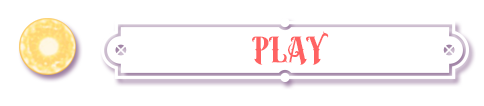
<style>
.page{position:relative;width:484px;height:106px;background:#ffffff}
.page>*{position:absolute;margin:0}
.t1{font:41.7px "Moyers";color:#ff6262}
</style>
<div class="page">
<p class="t1" style="left:252px;top:31px;width:77px;height:34px">PLAY</p>
</div>
